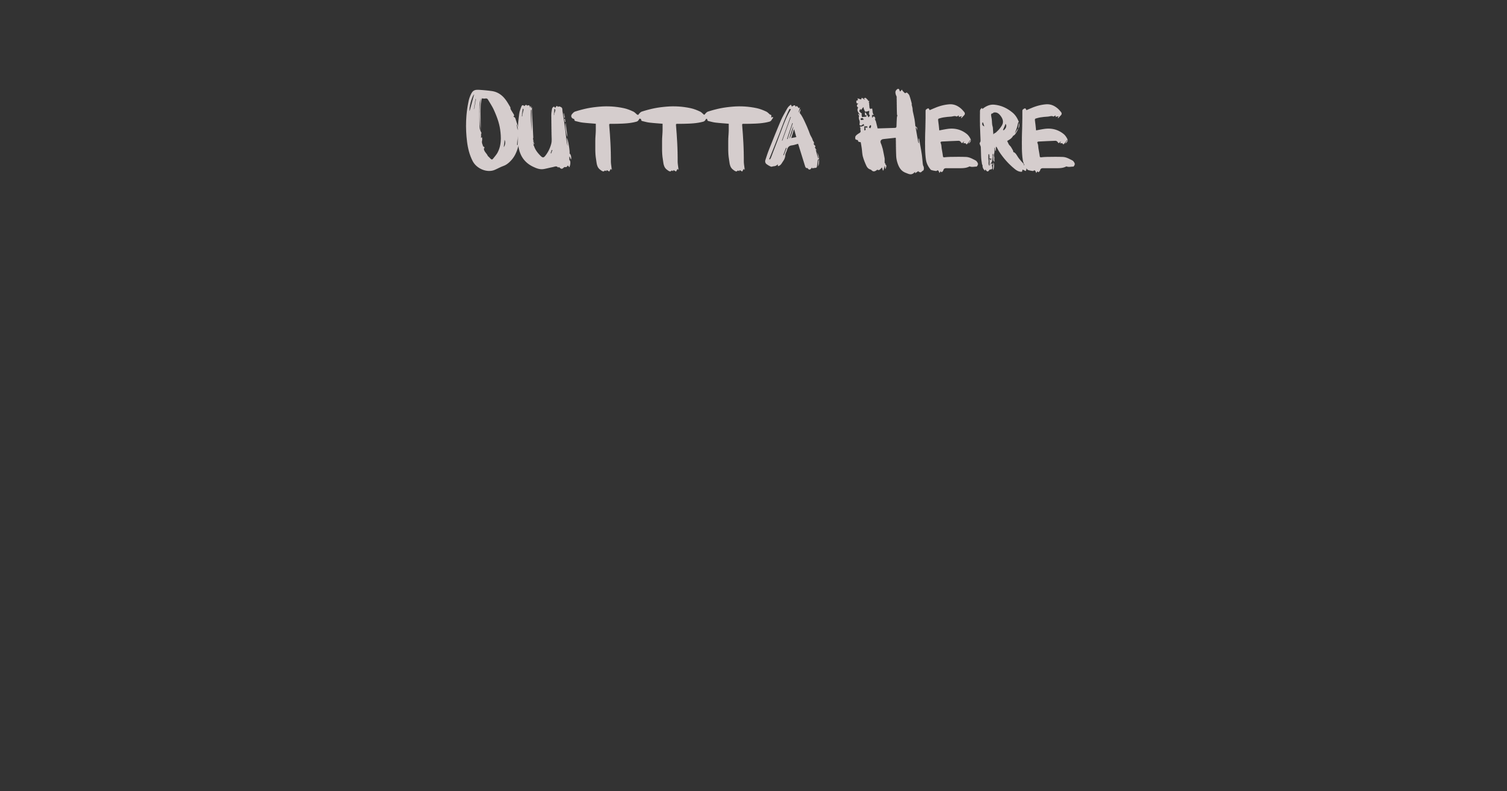
<style>
.page{position:relative;width:1507px;height:791px;background:#333333}
.page>*{position:absolute;margin:0}
.t1{font:122.5px "GracelandRegular";color:#ebe1e1}
</style>
<div class="page">
<p class="t1" style="left:466px;top:89px;width:609px;height:86px;opacity:0.88">Outtta Here</p>
</div>
